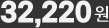
<style>
.page{position:relative;width:109px;height:28px;background:#333333}
.page>*{position:absolute;margin:0}
.t1{font:25px "DXBangtangoStd-Regular";color:#f2f2f2}
.t2{font:17px "NanumGothicBold";letter-spacing:-0.05em;color:#f2f2f2}
</style>
<div class="page">
<p class="t1" style="left:0px;top:0px;width:109px;height:28px">32,220<span class="t2">원</span></p>
</div>
